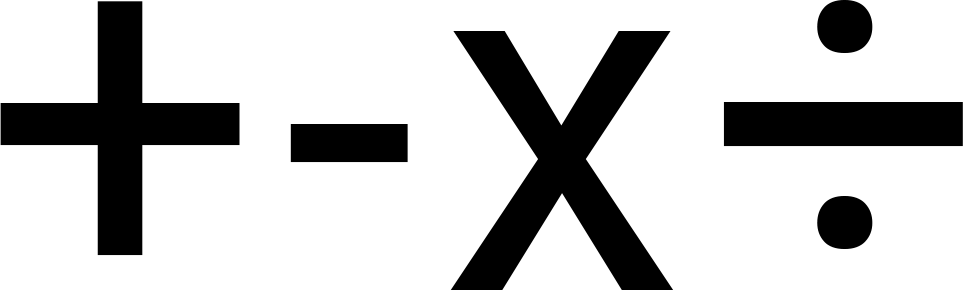
<style>
.page{position:relative;width:963px;height:290px;background:#ffffff}
.page>*{position:absolute;margin:0}
.t1{font:489.7px "Roboto-Regular";letter-spacing:-0.1em;color:#000000}
</style>
<div class="page">
<p class="t1" style="left:0px;top:0px;width:963px;height:290px">+ - x ÷</p>
</div>
